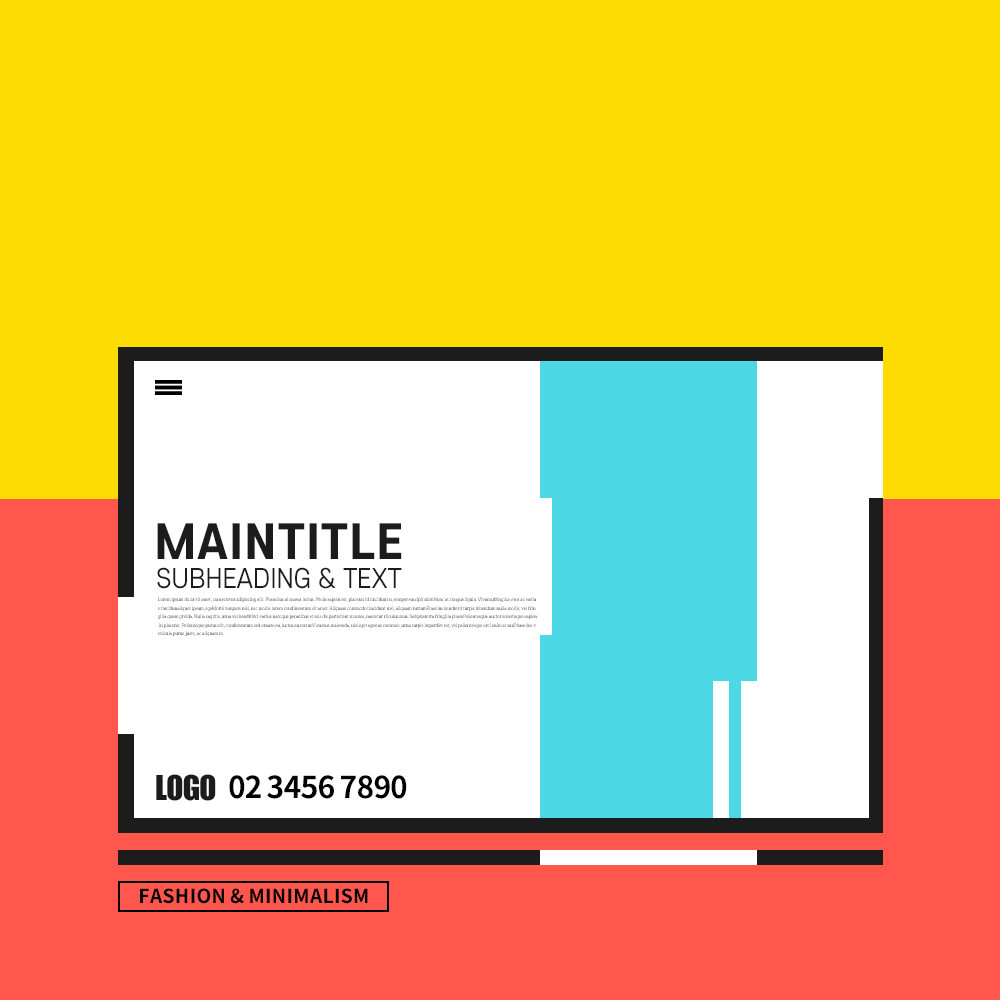
<style>
.page{position:relative;width:1000px;height:1000px;background:#fddc03}
.page>*{position:absolute;margin:0}
.t1{font:45.4px "S-CoreDream-7ExtraBold";letter-spacing:0.05em;color:#1c1c1c;scale:0.96 1}
.t2{font:25.5px "S-CoreDream-4Regular";color:#1c1c1c;scale:0.96 1}
.t3{font:5px/8.5px "IropkeBatangM";letter-spacing:-0.04em}
.t4{font:31.8px "Impact";letter-spacing:-0.025em;color:#1c1c1c}
.t5{font:30px "SourceHanSansKR-Bold";letter-spacing:-0.025em;color:#000000}
.t6{font:19.4px "SourceHanSansKR-Bold";letter-spacing:0.025em;color:#000000}
</style>
<div class="page">
<p class="t1" style="left:157px;top:523px;width:245px;height:36px">MAINTITLE</p>
<p class="t2" style="left:157px;top:567px;width:245px;height:22px">SUBHEADING &amp; TEXT</p>
<p class="t3" style="left:158px;top:597px;width:379px;height:39px">Lorem ipsum dolor sit amet, consectetur adipiscing elit. Phasellus at massa lectus. Proin sapien est, placerat id tincidunt n, semper suscipit nibhNunc at congue ligula. Vivamufringilla, eros ac variu<br>s tincidunaliquet ipsum, egeMorbi tempors nisl, nec mollis lorem condimentum sit amet. Aliquam commodo tincidunt nisi, aliquam rutrumPhasllus hendrerit turpis bibendum nulla mollis, vel frin<br>gilla quam grvida. Nulla sagittis, urna vel hendrOrci varius natoque penatibus et mis dis parturient montes, nascetur riiculus mus. Sed pharetra fringilla pharePellentesque auctor scelerisque sapien<br> in placerat. Pellenteque purus elit, condimentum sed ornare eu, luctus eu metusVivamus malesuda, nisi eget egestas commoo, urna turpis imperdiet est, vel pellentesque orci enim et nulPhasellus v<br>ehicula purus justo, ac aliquam m</p>
<p class="t4" style="left:156px;top:774px;width:60px;height:27px">LOGO</p>
<p class="t5" style="left:229px;top:775px;width:178px;height:24px">02 3456 7890</p>
<p class="t6" style="left:140px;top:888px;width:228px;height:16px">FASHION &amp; MINIMALISM</p>
</div>
